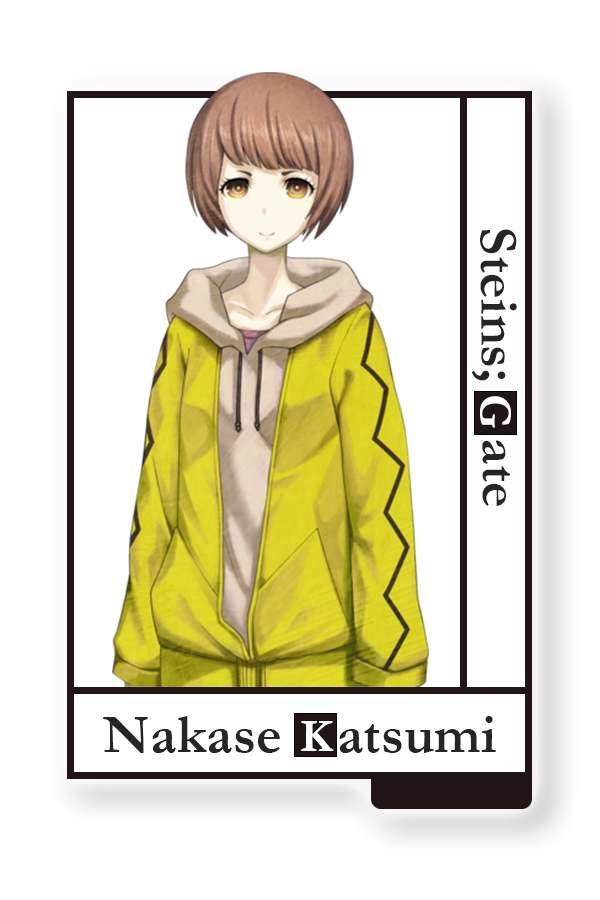
<style>
.page{position:relative;width:600px;height:900px;background:#ffffff}
.page>*{position:absolute;margin:0}
.t1{font:55.4px "Garamond-Bold";color:#252525}
.t2{font:47px "Garamond-Bold";color:#ffffff}
</style>
<div class="page">
<p class="t1" style="left:472px;top:229px;width:45px;height:277px;rotate:89deg">Steins;    ate</p>
<p class="t2" style="left:480px;top:396px;width:31px;height:32px;rotate:90deg">G</p>
<p class="t1" style="left:103px;top:716px;width:393px;height:37px">Nakase    atsumi</p>
<p class="t2" style="left:301px;top:721px;width:33px;height:30px">K</p>
</div>
